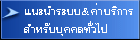
<style>
.page{position:relative;width:140px;height:40px}
.page>*{position:absolute;margin:0}
.t1{font:15.3px/18px "EucrosiaDSE";color:#ffffff;scale:1.12 1}
</style>
<div class="page">
<p class="t1" style="left:24px;top:3px;width:109px;height:33px">á¹Ð¹ÓÃÐºº &amp;¤èÒºÃÔ¡ÒÃ<br>ÊÓËÃÑººØ¤¤Å·ÑèÇä»</p>
</div>
